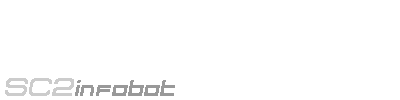
<style>
.page{position:relative;width:400px;height:100px;background:#ffffff}
.page>*{position:absolute;margin:0}
.t1{font:20.8px "MicroTech";color:#999999;font-weight:bold;font-style:italic}
.t2{font:25px "EuropeExtNormal";color:#cccccc;font-weight:bold;font-style:italic}
</style>
<div class="page">
<p class="t1" style="left:5px;top:78px;width:170px;height:18px"><span class="t2">SC2</span>InfoBot</p>
</div>
